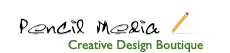
<style>
.page{position:relative;width:230px;height:53px;background:#ffffff}
.page>*{position:absolute;margin:0}
.t1{font:13px "GillSans";color:#447c24}
</style>
<div class="page">
<p class="t1" style="left:68px;top:40px;width:135px;height:12px">Creative Design Boutique</p>
</div>
